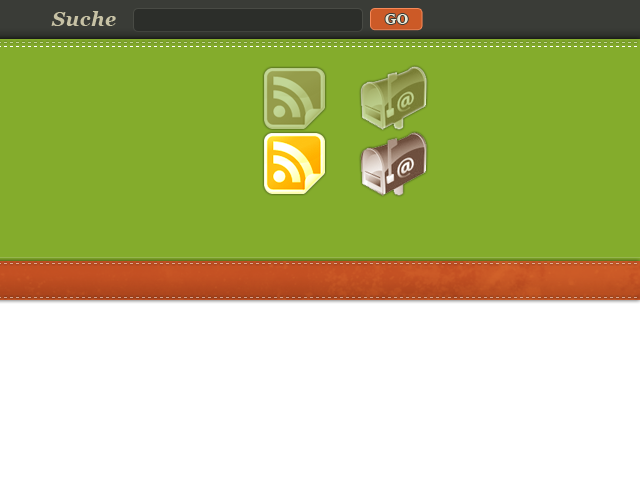
<style>
.page{position:relative;width:640px;height:480px;background:#84ac2c}
.page>*{position:absolute;margin:0}
.t1{font:20px "Georgia-BoldItalic";letter-spacing:0.025em;color:#c7c2a5}
.t2{font:14px "Georgia-Bold";letter-spacing:0.025em;color:#ebe9d6}
</style>
<div class="page">
<p class="t1" style="left:51px;top:11px;width:65px;height:15px">Suche</p>
<p class="t2" style="left:385px;top:14px;width:23px;height:10px">GO</p>
</div>
